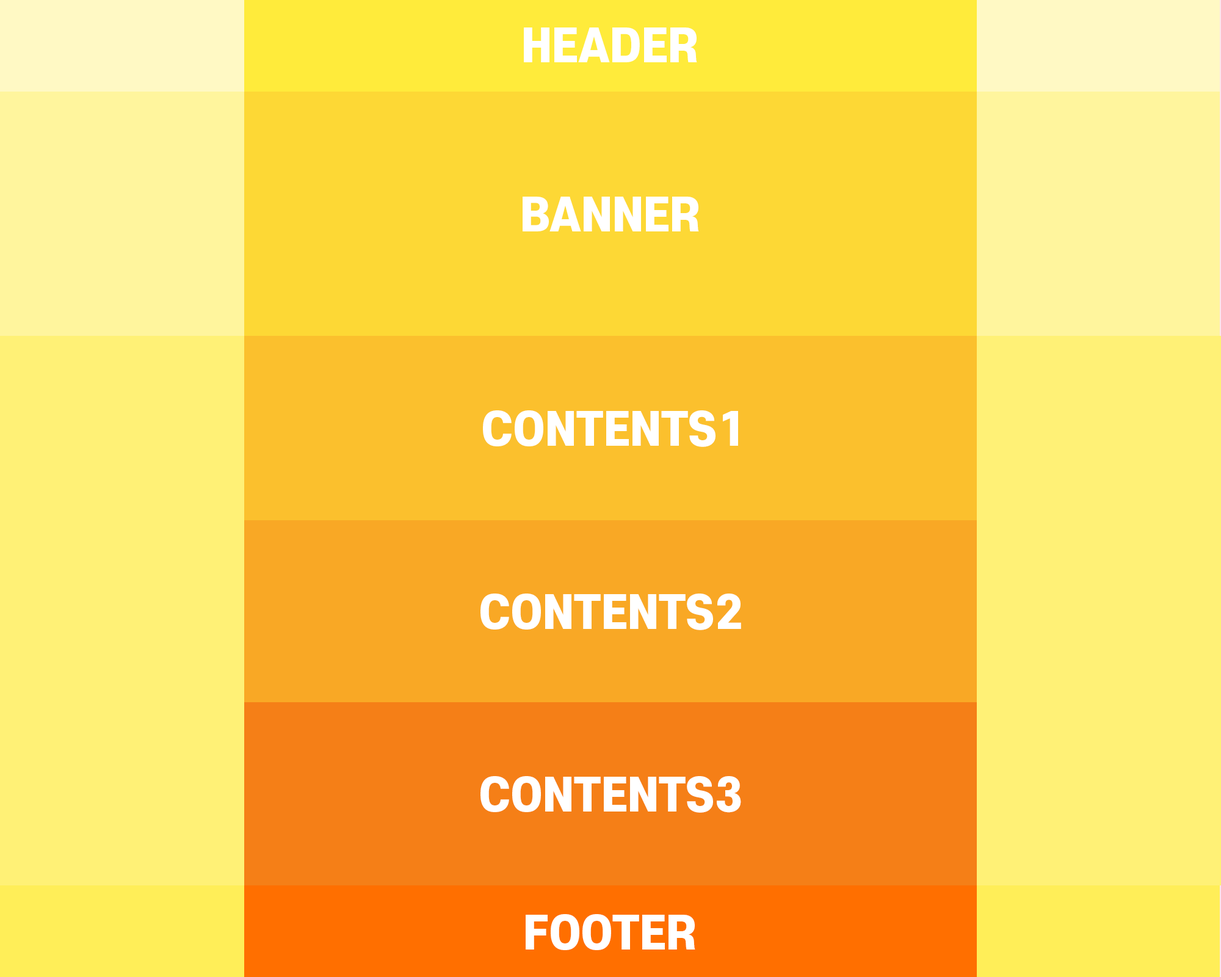
<style>
.page{position:relative;width:1221px;height:977px;background:#fff176}
.page>*{position:absolute;margin:0}
.t1{font:44px "S-CoreDream-8Heavy";color:#ffffff}
</style>
<div class="page">
<p class="t1" style="left:524px;top:27px;width:173px;height:35px">HEADER</p>
<p class="t1" style="left:523px;top:197px;width:176px;height:34px">BANNER</p>
<p class="t1" style="left:483px;top:410px;width:255px;height:37px">CONTENTS1</p>
<p class="t1" style="left:480px;top:593px;width:261px;height:37px">CONTENTS2</p>
<p class="t1" style="left:480px;top:776px;width:261px;height:36px">CONTENTS3</p>
<p class="t1" style="left:526px;top:914px;width:169px;height:36px">FOOTER</p>
</div>
